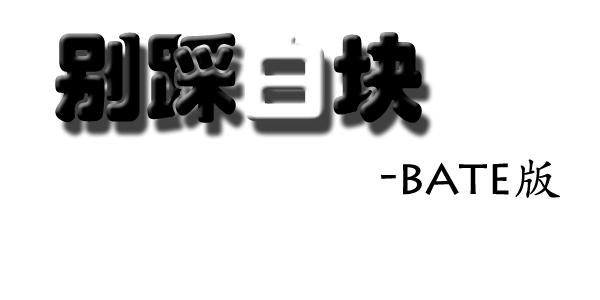
<style>
.page{position:relative;width:600px;height:300px;background:#ffffff}
.page>*{position:absolute;margin:0}
.t1{font:96.1px "STHupo";color:#000000}
.t2{font:96.1px "STHupo";color:#ffffff}
.t3{font:49.8px "LithosPro-Regular";color:#000000}
.t4{font:49.8px "STKaiti";color:#000000}
</style>
<div class="page">
<p class="t1" style="left:55px;top:32px;width:367px;height:91px">别踩<span class="t2">白</span>块</p>
<p class="t3" style="left:381px;top:159px;width:179px;height:39px">-bate<span class="t4">版</span></p>
</div>
